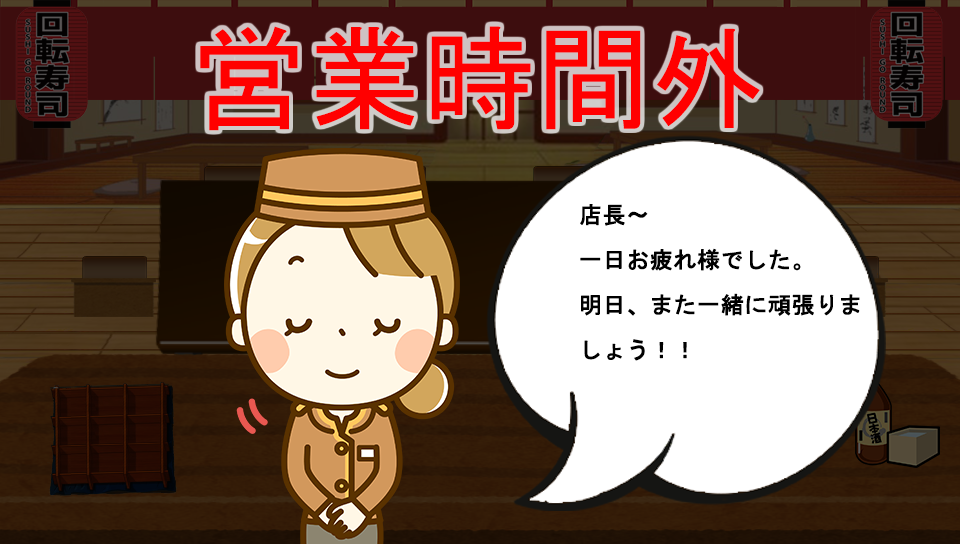
<style>
.page{position:relative;width:960px;height:544px}
.page>*{position:absolute;margin:0}
.t1{font:114.9px "MS-PGothic";color:#ff0000}
.t2{font:23px/45px "MS-Gothic";color:#000000;font-weight:bold}
</style>
<div class="page">
<p class="t1" style="left:200px;top:26px;width:560px;height:105px">営業時間外</p>
<p class="t2" style="left:580px;top:204px;width:280px;height:157px">店長～<br>一日お疲れ様でした。<br>明日、また一緒に頑張りま<br>しょう！！</p>
</div>
